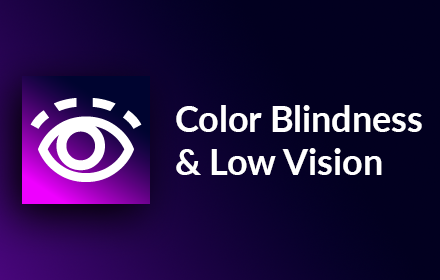
<style>
.page{position:relative;width:440px;height:280px;background:#020020}
.page>*{position:absolute;margin:0}
.t1{font:36px "Lato-Bold";color:#ffffff}
</style>
<div class="page">
<p class="t1" style="left:176px;top:105px;width:246px;height:70px">Color Blindness<br>&amp; Low Vision</p>
</div>
